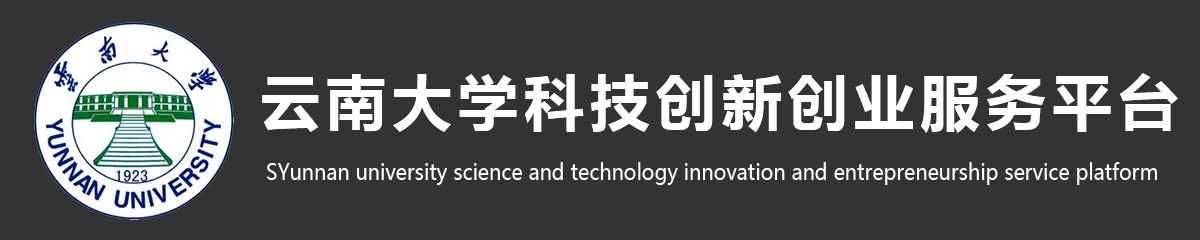
<style>
.page{position:relative;width:1200px;height:240px;background:#333333}
.page>*{position:absolute;margin:0}
.t1{font:60px "MicrosoftYaHei-Bold";letter-spacing:0.1em;color:#ffffff}
.t2{font:22px "MicrosoftYaHei";color:#ffffff;scale:0.91 1}
</style>
<div class="page">
<p class="t1" style="left:262px;top:73px;width:916px;height:60px">云南大学科技创新创业服务平台</p>
<p class="t2" style="left:267px;top:162px;width:890px;height:23px">SYunnan university science and technology innovation and entrepreneurship service platform</p>
</div>
